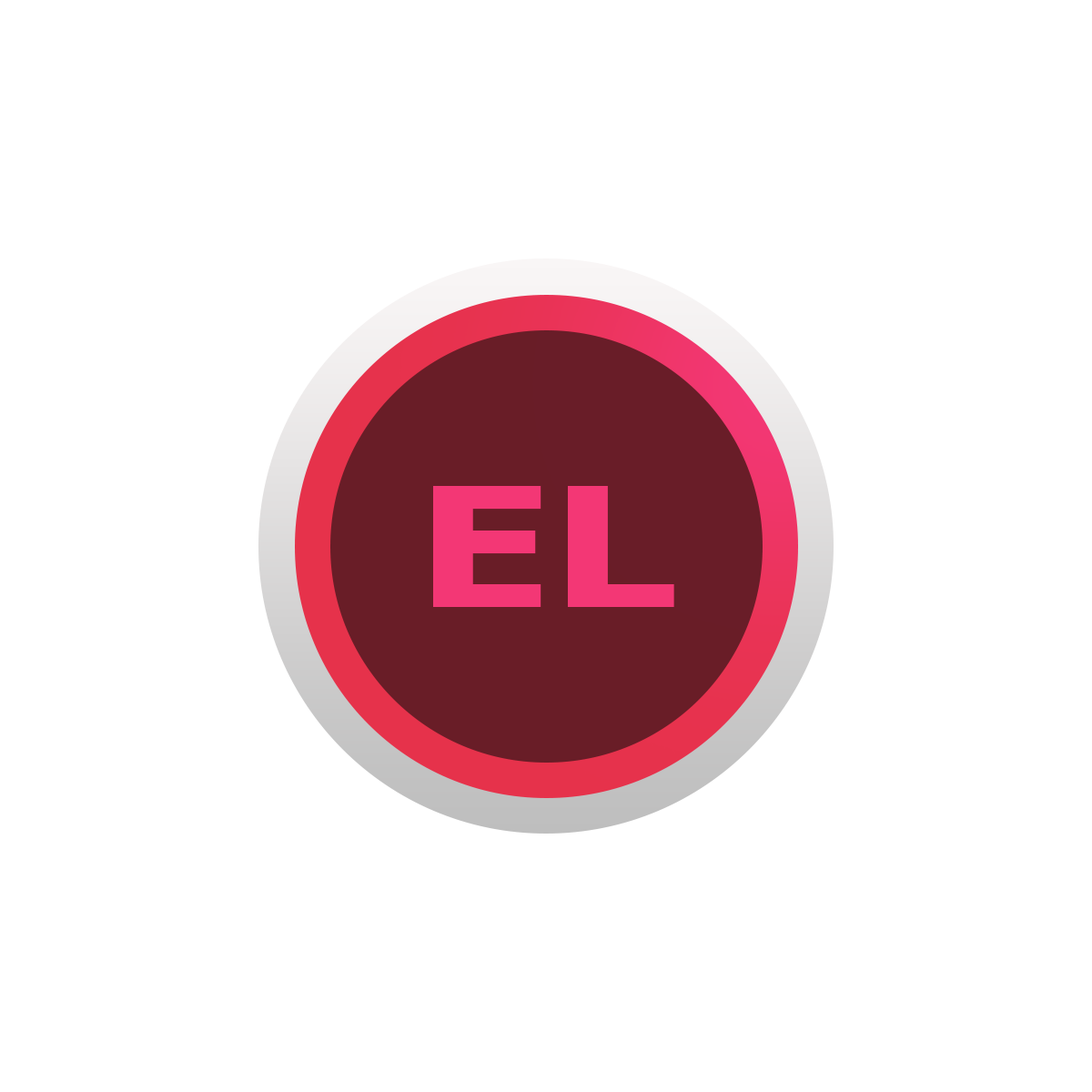
<style>
.page{position:relative;width:1092px;height:1092px;background:#ffffff}
.page>*{position:absolute;margin:0}
.t1{font:166.7px "Tahoma-Bold";color:#f33775;scale:1.31 1}
</style>
<div class="page">
<p class="t1" style="left:433px;top:486px;width:241px;height:121px">EL</p>
</div>
